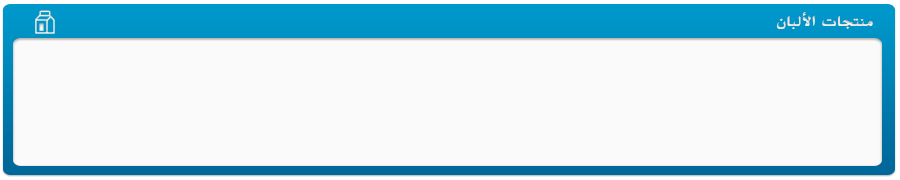
<style>
.page{position:relative;width:900px;height:180px;background:#fafafa}
.page>*{position:absolute;margin:0}
.t1{font:16px "BoutrosAdsMedium";color:#e9e9e7}
</style>
<div class="page">
<p class="t1" style="left:776px;top:12px;width:97px;height:17px">منتجات الألبان</p>
</div>
